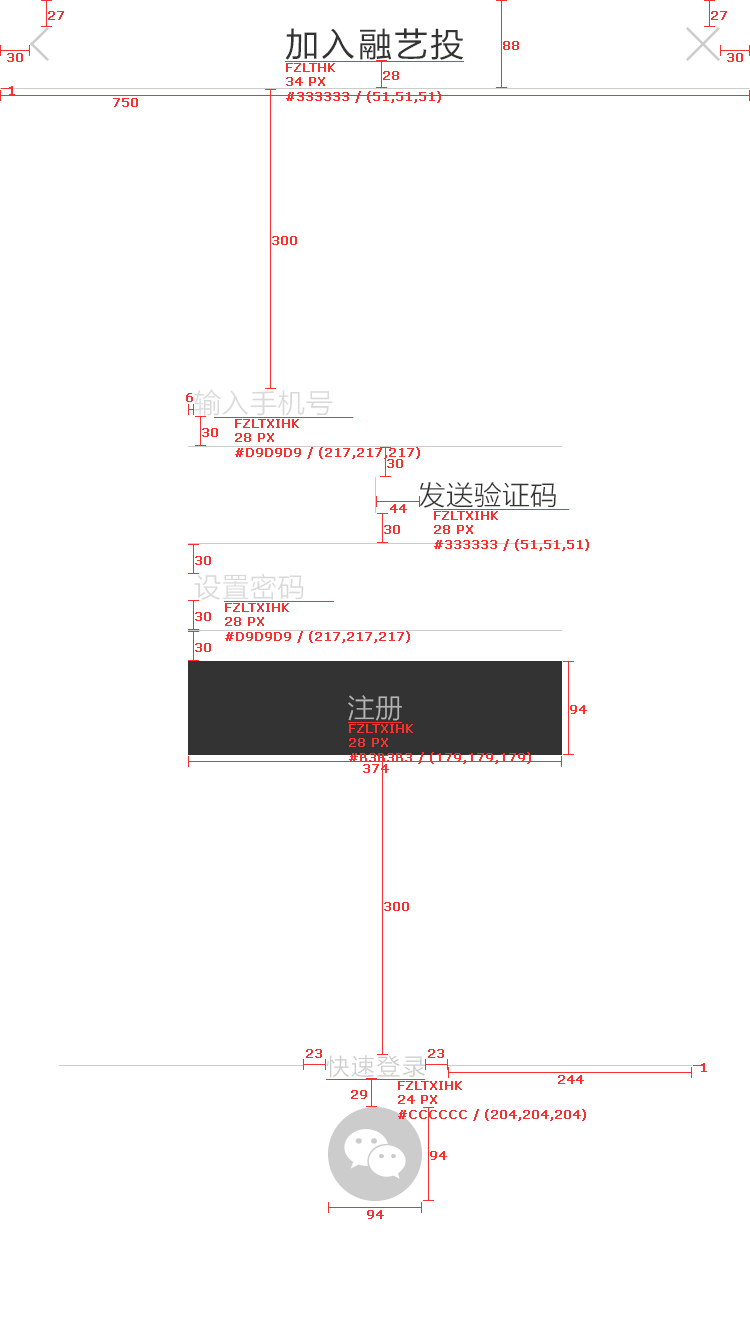
<style>
.page{position:relative;width:750px;height:1331px;background:#ffffff}
.page>*{position:absolute;margin:0}
.t1{font:12px "Verdana";color:#f83030;font-weight:bold}
.t2{font:34px "FZLTHK--GBK1-0";letter-spacing:0.06em;color:#333333}
.t3{font:28px "FZLTXIHK--GBK1-0";color:#d9d9d9}
.t4{font:28px "FZLTXIHK--GBK1-0";color:#333333}
.t5{font:28px "FZLTXIHK--GBK1-0";color:#b3b3b3}
.t6{font:24px "FZLTXIHK--GBK1-0";letter-spacing:0.06em;color:#cccccc}
</style>
<div class="page">
<p class="t1" style="left:48px;top:11px;width:16px;height:9px">27</p>
<p class="t1" style="left:711px;top:11px;width:16px;height:9px">27</p>
<p class="t2" style="left:285px;top:28px;width:179px;height:32px">加入融艺投</p>
<p class="t1" style="left:503px;top:41px;width:16px;height:9px">88</p>
<p class="t1" style="left:7px;top:53px;width:16px;height:9px">30</p>
<p class="t1" style="left:727px;top:53px;width:16px;height:9px">30</p>
<p class="t1" style="left:286px;top:63px;width:155px;height:40px">FZLTHK <br>34 PX<br>#333333 / (51,51,51)</p>
<p class="t1" style="left:383px;top:71px;width:16px;height:9px">28</p>
<p class="t1" style="left:9px;top:86px;width:6px;height:9px">1</p>
<p class="t1" style="left:113px;top:98px;width:25px;height:9px">750</p>
<p class="t1" style="left:272px;top:236px;width:25px;height:9px">300</p>
<p class="t3" style="left:194px;top:389px;width:139px;height:27px">输入手机号</p>
<p class="t1" style="left:186px;top:393px;width:7px;height:9px">6</p>
<p class="t1" style="left:235px;top:419px;width:185px;height:40px">FZLTXIHK <br>28 PX<br>#D9D9D9 / (217,217,217)</p>
<p class="t1" style="left:202px;top:428px;width:16px;height:9px">30</p>
<p class="t1" style="left:387px;top:459px;width:16px;height:9px">30</p>
<p class="t4" style="left:420px;top:482px;width:136px;height:26px">发送验证码</p>
<p class="t1" style="left:390px;top:504px;width:17px;height:9px">44</p>
<p class="t1" style="left:434px;top:511px;width:155px;height:40px">FZLTXIHK <br>28 PX<br>#333333 / (51,51,51)</p>
<p class="t1" style="left:384px;top:525px;width:16px;height:9px">30</p>
<p class="t1" style="left:195px;top:556px;width:16px;height:9px">30</p>
<p class="t3" style="left:194px;top:574px;width:110px;height:26px">设置密码</p>
<p class="t1" style="left:225px;top:603px;width:185px;height:40px">FZLTXIHK <br>28 PX<br>#D9D9D9 / (217,217,217)</p>
<p class="t1" style="left:195px;top:612px;width:16px;height:9px">30</p>
<p class="t1" style="left:195px;top:643px;width:16px;height:9px">30</p>
<p class="t5" style="left:348px;top:695px;width:54px;height:26px">注册</p>
<p class="t1" style="left:570px;top:705px;width:17px;height:9px">94</p>
<p class="t1" style="left:349px;top:724px;width:182px;height:40px">FZLTXIHK <br>28 PX<br>#B3B3B3 / (179,179,179)</p>
<p class="t1" style="left:363px;top:764px;width:26px;height:9px">374</p>
<p class="t1" style="left:384px;top:902px;width:25px;height:9px">300</p>
<p class="t1" style="left:306px;top:1049px;width:16px;height:9px">23</p>
<p class="t1" style="left:428px;top:1049px;width:16px;height:9px">23</p>
<p class="t6" style="left:326px;top:1055px;width:99px;height:23px">快速登录</p>
<p class="t1" style="left:701px;top:1063px;width:6px;height:9px">1</p>
<p class="t1" style="left:398px;top:1081px;width:188px;height:40px">FZLTXIHK <br>24 PX<br>#CCCCCC / (204,204,204)</p>
<p class="t1" style="left:558px;top:1075px;width:26px;height:9px">244</p>
<p class="t1" style="left:351px;top:1090px;width:16px;height:9px">29</p>
<p class="t1" style="left:430px;top:1151px;width:17px;height:9px">94</p>
<p class="t1" style="left:367px;top:1210px;width:17px;height:9px">94</p>
</div>
